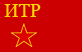
<style>
.page{position:relative;width:82px;height:52px;background:#cc0000}
.page>*{position:absolute;margin:0}
.t1{font:18px "Georgia";color:#ffd700}
</style>
<div class="page">
<p class="t1" style="left:4px;top:4px;width:37px;height:13px">ИТР</p>
</div>
